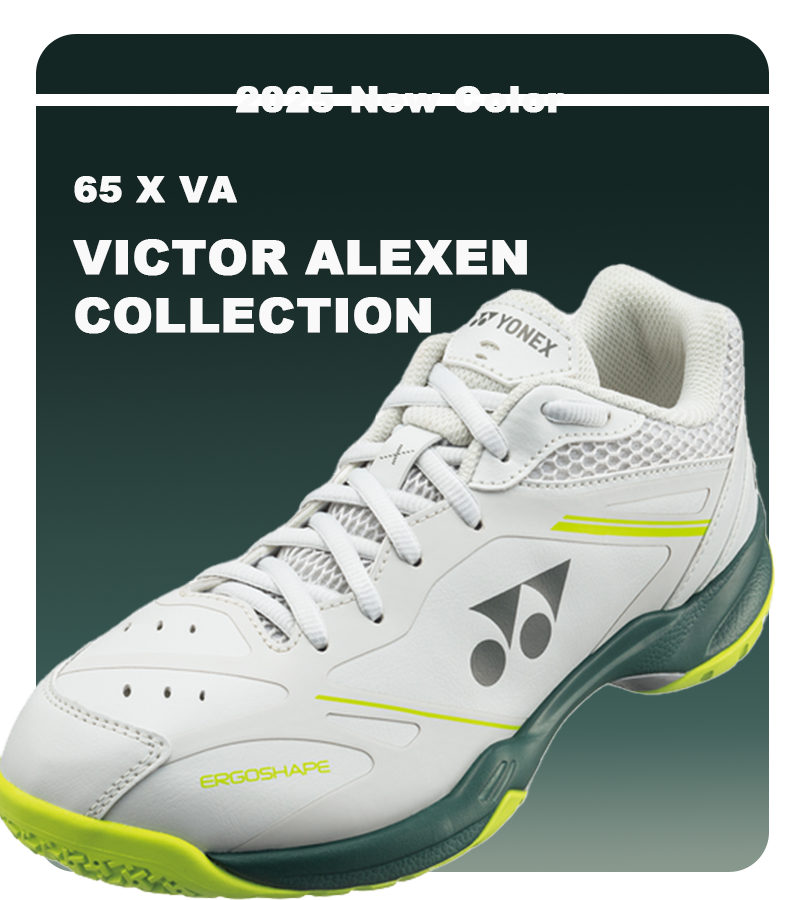
<style>
.page{position:relative;width:800px;height:900px}
.page>*{position:absolute;margin:0}
.t1{font:36px "Arial-Black";letter-spacing:0.005em;color:#f9f9f9;font-weight:bold}
.t2{font:48px/72px "Arial-Black";letter-spacing:0.005em;color:#f9f9f9;font-weight:bold}
.t3{font:36px/72px "Arial-Black";letter-spacing:0.005em;color:#f9f9f9;font-weight:bold}
.t4{font:48px "Arial-Black";letter-spacing:0.005em;color:#f9f9f9;font-weight:bold}
</style>
<div class="page">
<p class="t1" style="left:236px;top:86px;width:328px;height:27px">2025 New Color</p>
<p class="t2" style="left:73px;top:176px;width:454px;height:158px"><span class="t3">65 X VA<br></span>VICTOR ALEXEN<br><span class="t4">COLLECTION</span></p>
</div>
